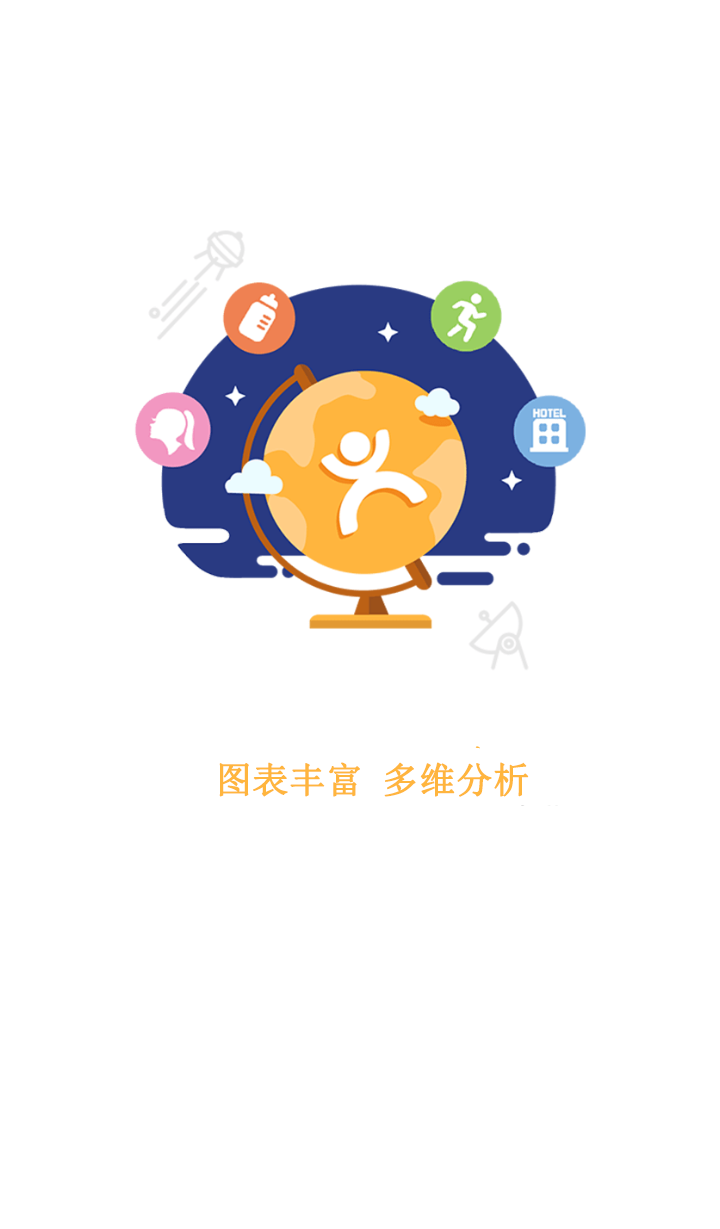
<style>
.page{position:relative;width:720px;height:1229px;background:#ffffff}
.page>*{position:absolute;margin:0}
.t1{font:36px "SimSun";color:#ffb53e;font-weight:bold}
</style>
<div class="page">
<p class="t1" style="left:219px;top:762px;width:310px;height:35px">图表丰富 多维分析</p>
</div>
